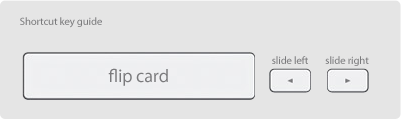
<style>
.page{position:relative;width:401px;height:119px;background:#e5e5e5}
.page>*{position:absolute;margin:0}
.t1{font:10.7px "MyriadPro-Regular";letter-spacing:-0.01em;color:#7a7a7c}
.t2{font:18.4px "MyriadPro-Regular";letter-spacing:-0.01em;color:#7a7a7c}
</style>
<div class="page">
<p class="t1" style="left:20px;top:17px;width:82px;height:11px">Shortcut key guide</p>
<p class="t1" style="left:272px;top:56px;width:36px;height:8px">slide left</p>
<p class="t1" style="left:325px;top:56px;width:44px;height:10px">slide right</p>
<p class="t2" style="left:108px;top:68px;width:60px;height:18px">flip card</p>
</div>
